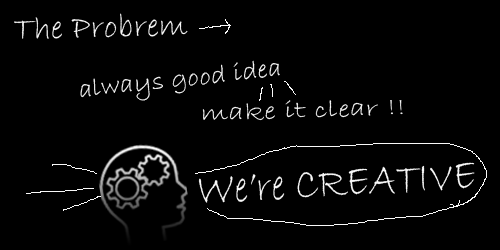
<style>
.page{position:relative;width:500px;height:250px;background:#000000}
.page>*{position:absolute;margin:0}
.t1{font:33.2px "BradleyHandITC";letter-spacing:0.01em;color:#f8f8f8}
.t2{font:25.8px "BradleyHandITC";letter-spacing:0.01em;color:#f8f8f8;scale:1.08 1}
.t3{font:25px "BradleyHandITC";letter-spacing:0.01em;color:#f8f8f8;scale:1.28 1}
.t4{font:45.6px "BradleyHandITC";letter-spacing:0.01em;color:#f8f8f8;scale:0.83 1}
</style>
<div class="page">
<p class="t1" style="left:14px;top:13px;width:174px;height:26px;rotate:-1deg">The Probrem</p>
<p class="t2" style="left:80px;top:60px;width:200px;height:41px;rotate:-6deg">always good idea</p>
<p class="t3" style="left:202px;top:100px;width:201px;height:21px;rotate:-2deg">make it clear !!</p>
<p class="t4" style="left:198px;top:162px;width:277px;height:41px;rotate:-3deg">We’re CREATIVE</p>
</div>
